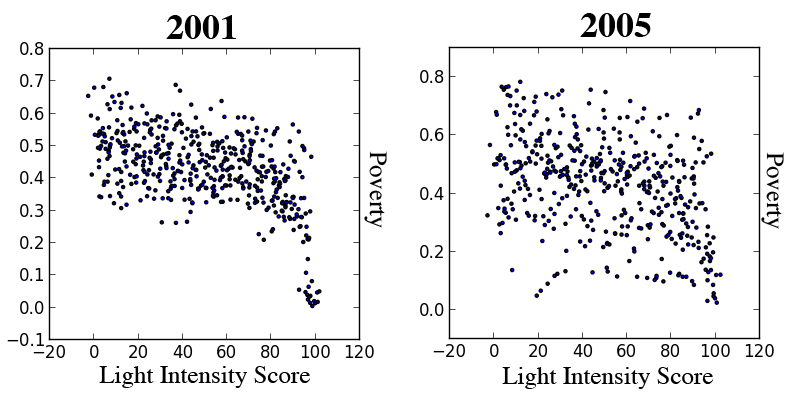
<style>
.page{position:relative;width:800px;height:400px;background:#ffffff}
.page>*{position:absolute;margin:0}
.t1{font:36px "Times-Bold";color:#000000}
.t2{font:25px "Times-Roman";color:#000000}
</style>
<div class="page">
<p class="t1" style="left:166px;top:15px;width:70px;height:24px">2001</p>
<p class="t1" style="left:580px;top:13px;width:71px;height:24px">2005</p>
<p class="t2" style="left:364px;top:151px;width:23px;height:77px;rotate:90deg">Poverty</p>
<p class="t2" style="left:761px;top:152px;width:23px;height:77px;rotate:90deg">Poverty</p>
<p class="t2" style="left:99px;top:366px;width:211px;height:22px">Light Intensity Score</p>
<p class="t2" style="left:502px;top:367px;width:211px;height:22px">Light Intensity Score</p>
</div>
